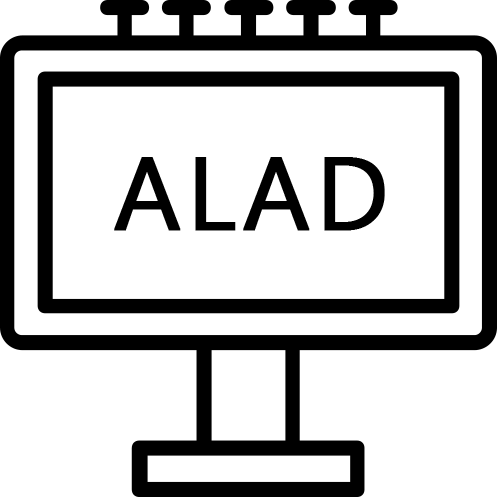
<style>
.page{position:relative;width:497px;height:497px;background:#ffffff}
.page>*{position:absolute;margin:0}
.t1{font:100px "MalgunGothic";letter-spacing:0.05em;color:#000000;font-weight:bold}
</style>
<div class="page">
<p class="t1" style="left:114px;top:157px;width:271px;height:74px">ALAD</p>
</div>
